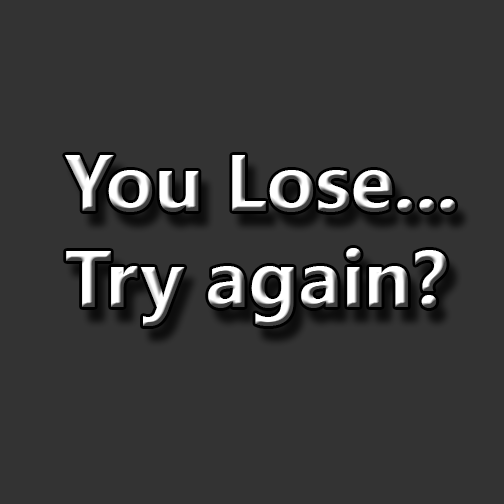
<style>
.page{position:relative;width:504px;height:504px;background:#333333}
.page>*{position:absolute;margin:0}
.t1{font:80px "SegoeUI-Bold"}
</style>
<div class="page">
<p class="t1" style="left:65px;top:155px;width:391px;height:171px">You Lose...<br>Try again?</p>
</div>
